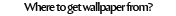
<style>
.page{position:relative;width:176px;height:16px;background:#ffffff}
.page>*{position:absolute;margin:0}
.t1{font:12px "AmiraParadiso";letter-spacing:-0.08em;color:#000000}
</style>
<div class="page">
<p class="t1" style="left:24px;top:2px;width:129px;height:12px;opacity:0.96">Where to get wallpaper from?</p>
</div>
